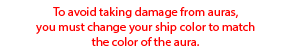
<style>
.page{position:relative;width:300px;height:50px;background:#ffffff}
.page>*{position:absolute;margin:0}
.t1{font:12.5px "MyriadPro-Regular";color:#ff0000}
</style>
<div class="page">
<p class="t1" style="left:36px;top:7px;width:219px;height:39px;text-align:center">To avoid taking damage from auras,<br>you must change your ship color to match<br>the color of the aura.</p>
</div>
